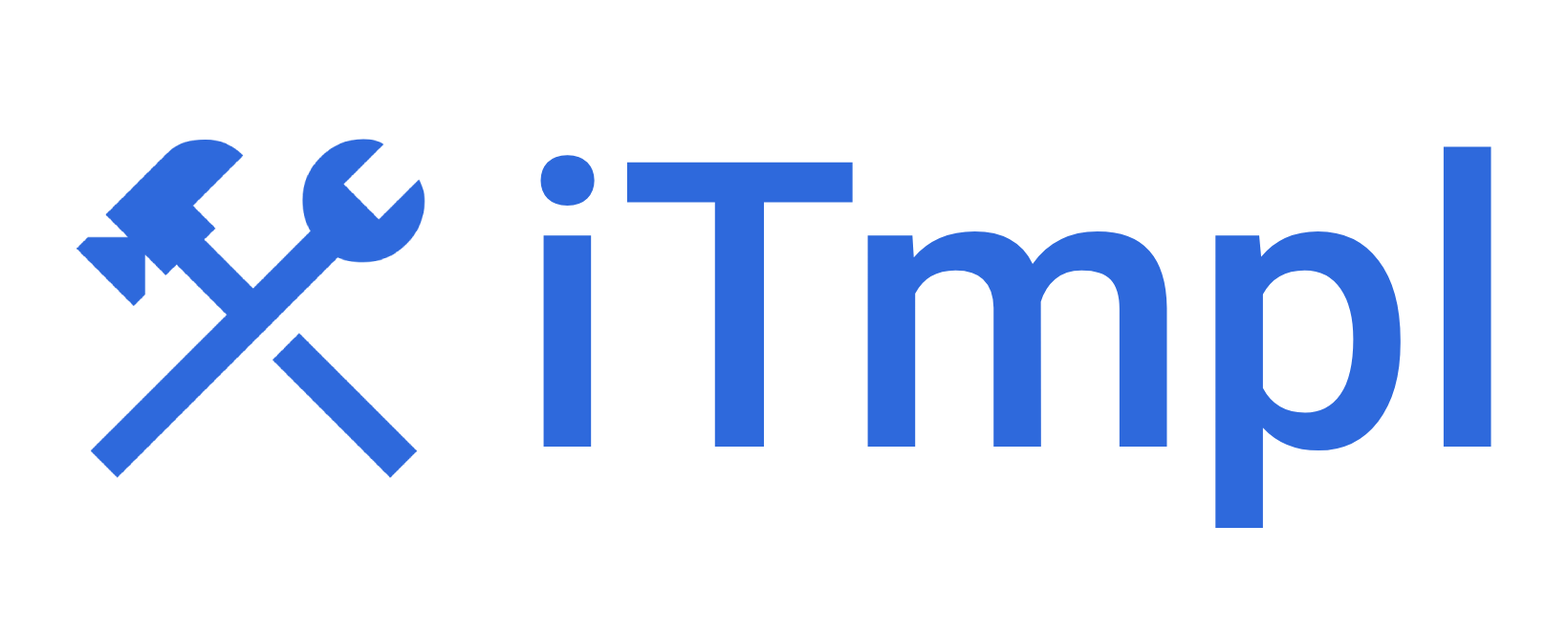
<style>
.page{position:relative;width:1568px;height:635px;background:#ffffff}
.page>*{position:absolute;margin:0}
.t1{font:399.6px "Roboto-Medium";color:#2e69dc}
</style>
<div class="page">
<p class="t1" style="left:540px;top:146px;width:952px;height:382px">iTmpl</p>
</div>
